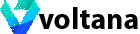
<style>
.page{position:relative;width:140px;height:34px;background:#ffffff}
.page>*{position:absolute;margin:0}
.t1{font:30px "MyriadPro-Bold";color:#000000}
</style>
<div class="page">
<p class="t1" style="left:38px;top:7px;width:100px;height:22px">voltana</p>
</div>
